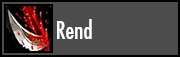
<style>
.page{position:relative;width:180px;height:57px;background:#4c4c4c}
.page>*{position:absolute;margin:0}
.t1{font:24px "FuturaCondensed";color:#ffffff}
</style>
<div class="page">
<p class="t1" style="left:57px;top:19px;width:35px;height:20px">Rend</p>
</div>
